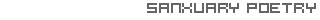
<style>
.page{position:relative;width:320px;height:20px;background:#ffffff}
.page>*{position:absolute;margin:0}
.t1{font:16px "Hooge0553";letter-spacing:-0.015em;color:#666666}
</style>
<div class="page">
<p class="t1" style="left:147px;top:3px;width:169px;height:10px">SANXUARY POETRY</p>
</div>
